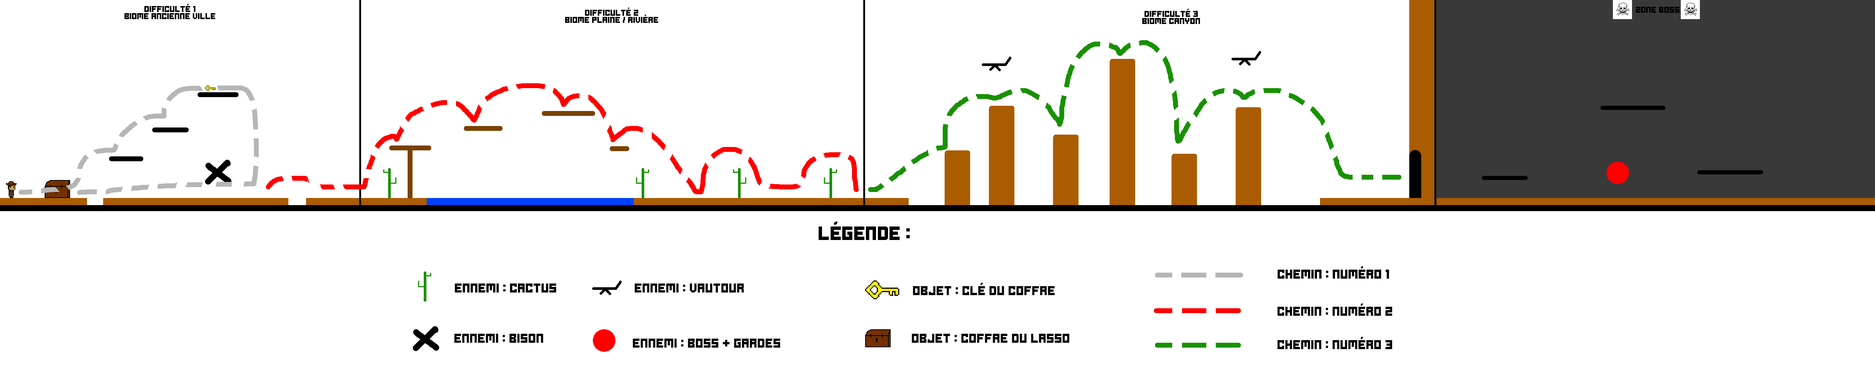
<style>
.page{position:relative;width:1875px;height:375px;background:#ffffff}
.page>*{position:absolute;margin:0}
.t1{font:6px "Ode-to-Idle-Gaming";color:#000000}
.t2{font:13.5px "Ode-to-Idle-Gaming";color:#000000}
.t3{font:13.5px "Ode-to-Idle-Gaming";color:#ffffff}
.t4{font:9px "Ode-to-Idle-Gaming";color:#000000}
</style>
<div class="page">
<p class="t1" style="left:124px;top:4px;width:91px;height:15px;text-align:center">Difficulté 1<br>biome ancienne ville</p>
<p class="t1" style="left:565px;top:8px;width:93px;height:15px;text-align:center">Difficulté 2<br>Biome plaine / rivière</p>
<p class="t1" style="left:1142px;top:9px;width:58px;height:15px;text-align:center">Difficulté 3<br>biome canyon</p>
<p class="t2" style="left:807px;top:221px;width:103px;height:19px"><span class="t3">L</span>Légende :</p>
<p class="t4" style="left:1278px;top:266px;width:111px;height:13px">Chemin : Numéro 1</p>
<p class="t4" style="left:455px;top:284px;width:101px;height:8px">Ennemi : Cactus</p>
<p class="t4" style="left:634px;top:284px;width:110px;height:8px">Ennemi : vautour</p>
<p class="t4" style="left:913px;top:283px;width:142px;height:12px">objet : clé du coffre</p>
<p class="t4" style="left:1277px;top:303px;width:115px;height:13px">Chemin : Numéro 2</p>
<p class="t4" style="left:454px;top:334px;width:89px;height:9px">Ennemi : bison</p>
<p class="t4" style="left:633px;top:339px;width:147px;height:9px">Ennemi : boss + gardes</p>
<p class="t4" style="left:912px;top:334px;width:158px;height:9px">objet : coffre du lasso</p>
<p class="t4" style="left:1277px;top:337px;width:115px;height:12px">Chemin : Numéro 3</p>
</div>
